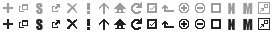
<style>
.page{position:relative;width:272px;height:32px;background:#ffffff}
.page>*{position:absolute;margin:0}
.t1{font:14px "Impact";color:#9b9b9b}
.t2{font:14px "Impact";color:#242224}
</style>
<div class="page">
<p class="t1" style="left:36px;top:3px;width:7px;height:11px">S</p>
<p class="t1" style="left:228px;top:3px;width:7px;height:11px">N</p>
<p class="t1" style="left:243px;top:3px;width:10px;height:11px">M</p>
<p class="t2" style="left:36px;top:19px;width:7px;height:11px">S</p>
<p class="t2" style="left:228px;top:19px;width:7px;height:11px">N</p>
<p class="t2" style="left:243px;top:19px;width:10px;height:11px">M</p>
</div>
